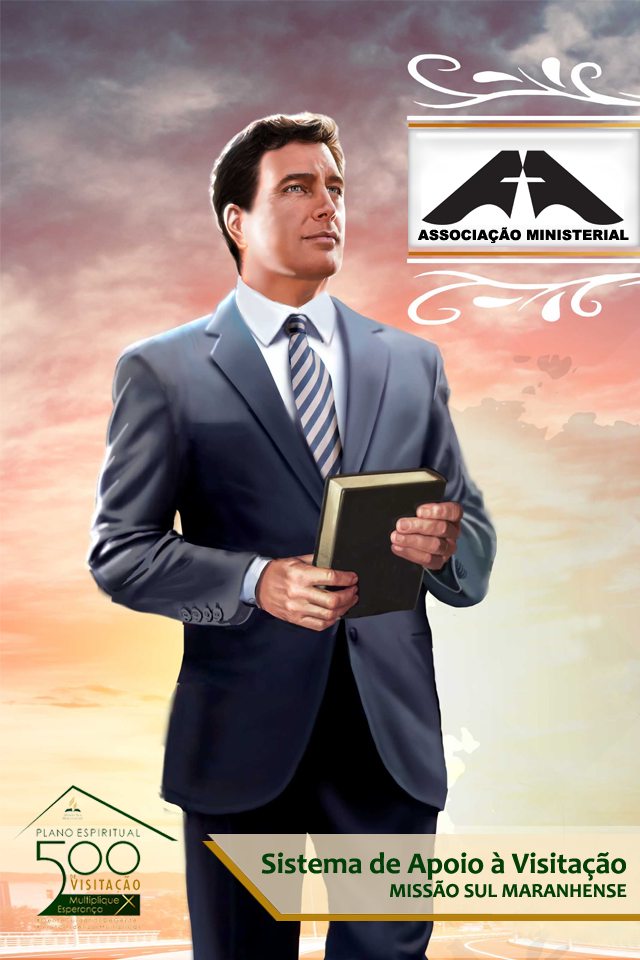
<style>
.page{position:relative;width:640px;height:960px}
.page>*{position:absolute;margin:0}
.t1{font:14px "Arial-Black";color:#000000}
.t2{font:30px "Candara-Bold";color:#023e08}
.t3{font:20px "Candara-Bold";color:#023e08}
</style>
<div class="page">
<p class="t1" style="left:418px;top:227px;width:211px;height:16px">ASSOCIAÇÃO MINISTERIAL</p>
<p class="t2" style="left:261px;top:852px;width:366px;height:46px;text-align:right">Sistema de Apoio à Visitação<br><span class="t3">MISSÃO SUL MARANHENSE</span></p>
</div>
